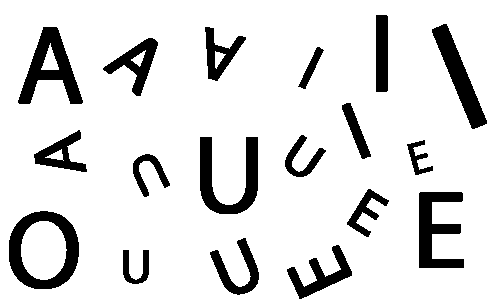
<style>
.page{position:relative;width:500px;height:300px;background:#ffffff}
.page>*{position:absolute;margin:0}
.t1{font:110.4px "MyriadPro-Regular";color:#000000;font-weight:bold}
.t2{font:71.4px "MyriadPro-Regular";color:#000000;font-weight:bold}
.t3{font:156.4px "MyriadPro-Regular";color:#000000;font-weight:bold}
.t4{font:78.2px "MyriadPro-Regular";color:#000000;font-weight:bold}
.t5{font:63.7px "MyriadPro-Regular";color:#000000;font-weight:bold}
.t6{font:81.9px "MyriadPro-Regular";color:#000000;font-weight:bold}
.t7{font:54.3px "MyriadPro-Regular";color:#000000;font-weight:bold}
.t8{font:45.5px "MyriadPro-Regular";color:#000000;font-weight:bold}
.t9{font:59.9px "MyriadPro-Regular";color:#000000;font-weight:bold}
.t10{font:71.7px "MyriadPro-Regular";color:#000000;font-weight:bold}
.t11{font:82.8px "MyriadPro-Regular";color:#000000;font-weight:bold}
.t12{font:48.8px "MyriadPro-Regular";color:#000000;font-weight:bold}
</style>
<div class="page">
<p class="t1" style="left:376px;top:15px;width:12px;height:77px">I</p>
<p class="t1" style="left:18px;top:27px;width:65px;height:77px">A</p>
<p class="t2" style="left:205px;top:27px;width:41px;height:54px;rotate:-165deg">A</p>
<p class="t3" style="left:432px;top:24px;width:55px;height:105px;rotate:-22deg">I</p>
<p class="t4" style="left:103px;top:38px;width:55px;height:58px;rotate:38deg">A</p>
<p class="t5" style="left:298px;top:47px;width:26px;height:42px;rotate:26deg">I</p>
<p class="t6" style="left:342px;top:103px;width:29px;height:56px;rotate:-22deg">I</p>
<p class="t2" style="left:34px;top:130px;width:53px;height:42px;rotate:-99deg">A</p>
<p class="t1" style="left:200px;top:137px;width:58px;height:77px">U</p>
<p class="t7" style="left:285px;top:135px;width:41px;height:42px;rotate:34deg">U</p>
<p class="t8" style="left:407px;top:140px;width:26px;height:35px;rotate:-15deg">E</p>
<p class="t7" style="left:133px;top:154px;width:37px;height:43px;rotate:155deg">U</p>
<p class="t9" style="left:347px;top:189px;width:42px;height:48px;rotate:32deg">E</p>
<p class="t1" style="left:419px;top:192px;width:45px;height:76px">E</p>
<p class="t1" style="left:9px;top:211px;width:70px;height:78px">O</p>
<p class="t10" style="left:210px;top:238px;width:49px;height:57px;rotate:-23deg">U</p>
<p class="t11" style="left:287px;top:245px;width:65px;height:54px;rotate:-115deg">E</p>
<p class="t12" style="left:123px;top:250px;width:26px;height:34px">U</p>
</div>
